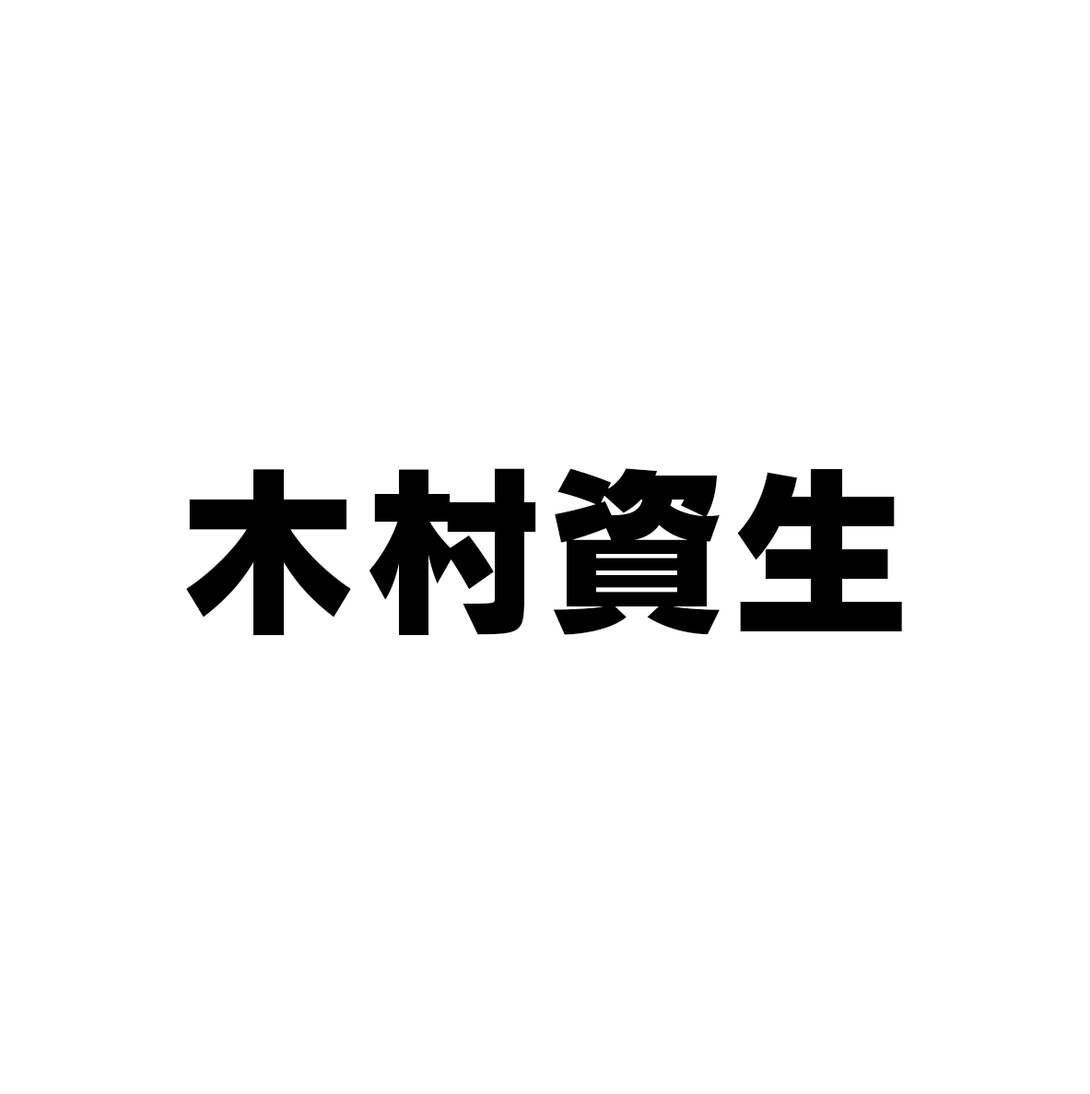
<style>
.page{position:relative;width:1090px;height:1094px;background:#ffffff}
.page>*{position:absolute;margin:0}
.t1{font:184.3px "RodinCamillePro-EB";color:#000000}
</style>
<div class="page">
<p class="t1" style="left:186px;top:468px;width:716px;height:168px">木村資生</p>
</div>
